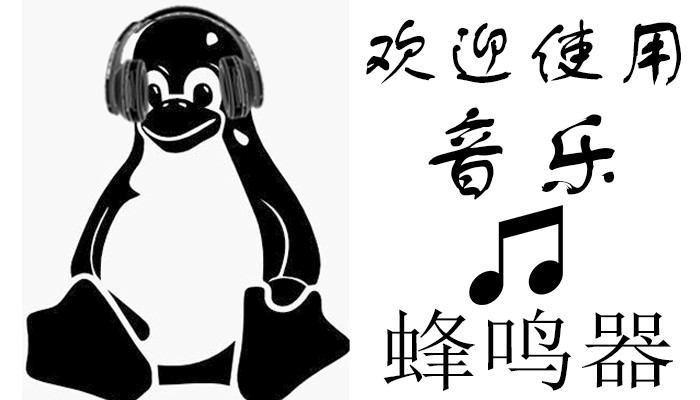
<style>
.page{position:relative;width:700px;height:400px;background:#ffffff}
.page>*{position:absolute;margin:0}
.t1{font:84.3px "FZSTK--GBK1-0";color:#000000}
.t2{font:108.3px "FZSTK--GBK1-0";color:#000000}
.t3{font:89.5px "SimSun";color:#000000;scale:1.11 1}
</style>
<div class="page">
<p class="t1" style="left:366px;top:19px;width:315px;height:67px">欢迎使用</p>
<p class="t2" style="left:428px;top:107px;width:187px;height:93px">音乐</p>
<p class="t3" style="left:383px;top:308px;width:290px;height:83px">蜂鸣器</p>
</div>
